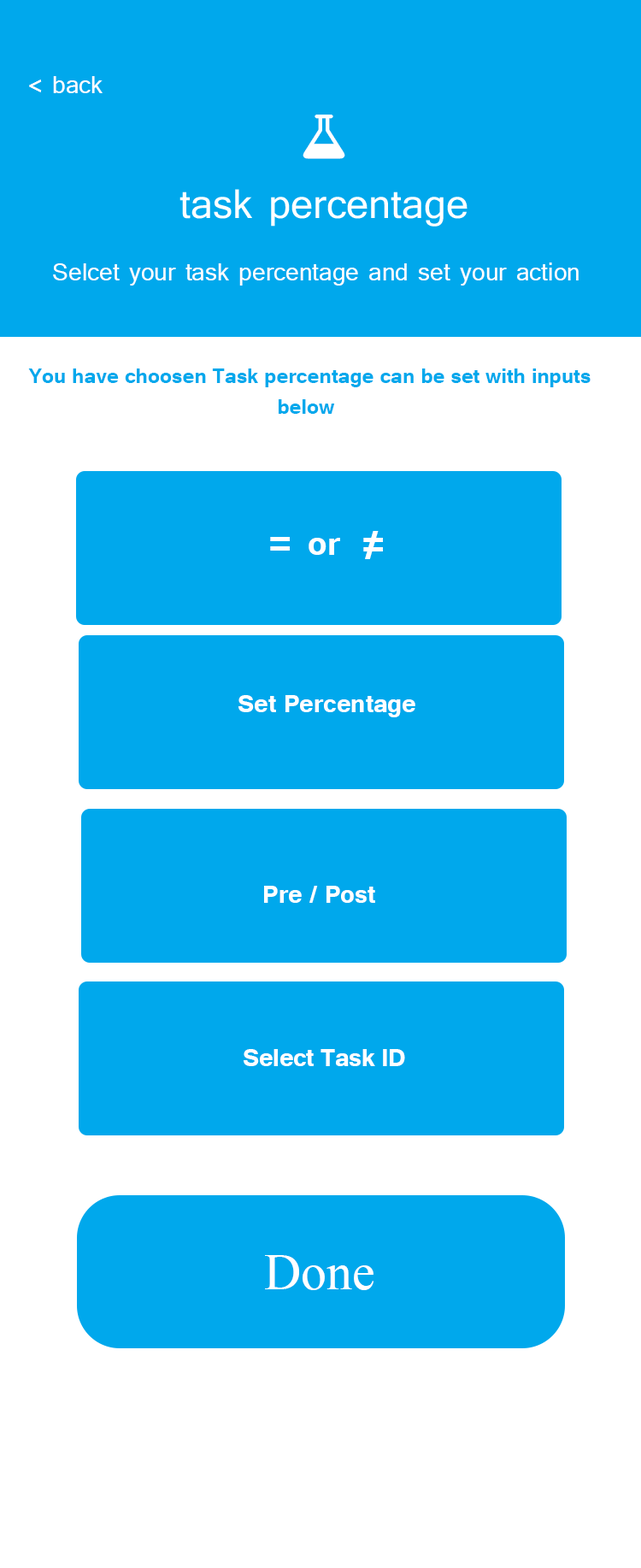
<style>
.page{position:relative;width:641px;height:1568px;background:#00a8ec}
.page>*{position:absolute;margin:0}
.t1{font:30.8px "Tunga";color:#ffffff}
.t2{font:25.6px "Tunga-Bold";color:#00a8ec}
.t3{font:51.3px "Tunga-Bold";color:#ffffff}
.t4{font:41px "Tunga-Bold";color:#ffffff}
.t5{font:30.8px "Tunga-Bold";color:#ffffff}
.t6{font:30.8px "Tunga-Bold";letter-spacing:-0.01em;color:#ffffff}
.t7{font:51.3px "TimesNewRomanPSMT";color:#ffffff}
</style>
<div class="page">
<p class="t1" style="left:29px;top:76px;width:74px;height:17px">&lt; back</p>
<p class="t1" style="left:53px;top:262px;width:526px;height:24px">Selcet your task percentage and set your action</p>
<p class="t2" style="left:28px;top:368px;width:563px;height:46px">You have choosen Task percentage can be set with inputs <br>                                          below</p>
<p class="t3" style="left:365px;top:531px;width:14px;height:28px">/</p>
<p class="t3" style="left:270px;top:537px;width:20px;height:14px">=</p>
<p class="t4" style="left:309px;top:538px;width:31px;height:17px">or</p>
<p class="t3" style="left:363px;top:538px;width:20px;height:13px">=</p>
<p class="t5" style="left:239px;top:695px;width:177px;height:22px">Set Percentage</p>
<p class="t5" style="left:264px;top:886px;width:111px;height:17px">Pre / Post</p>
<p class="t6" style="left:244px;top:1049px;width:161px;height:17px">Select Task ID</p>
<p class="t7" style="left:265px;top:1255px;width:109px;height:35px">Done</p>
</div>
